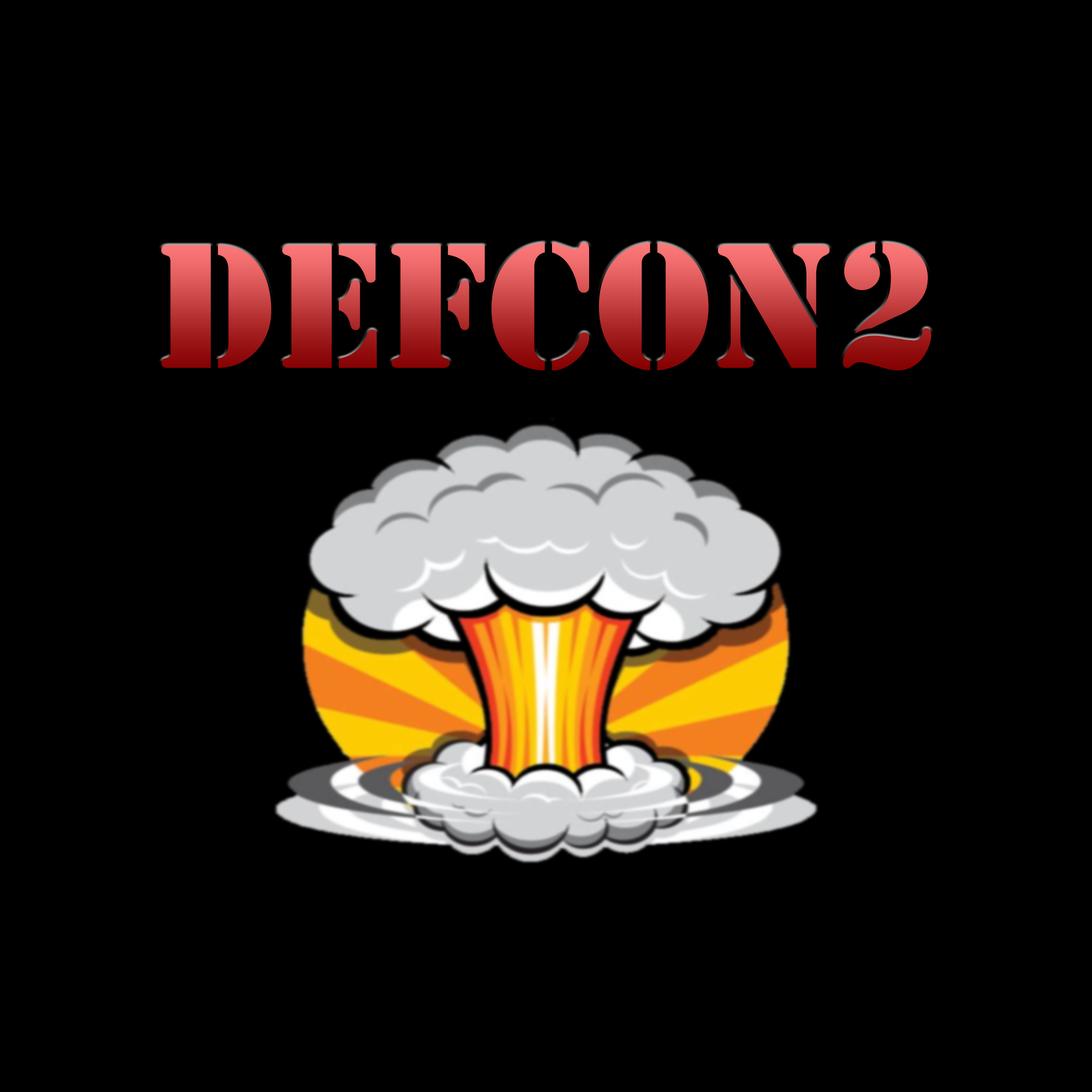
<style>
.page{position:relative;width:1092px;height:1092px;background:#000000}
.page>*{position:absolute;margin:0}
.t1{font:163.8px "StencilStd"}
</style>
<div class="page">
<p class="t1" style="left:161px;top:242px;width:770px;height:129px">DEFCON2</p>
</div>
